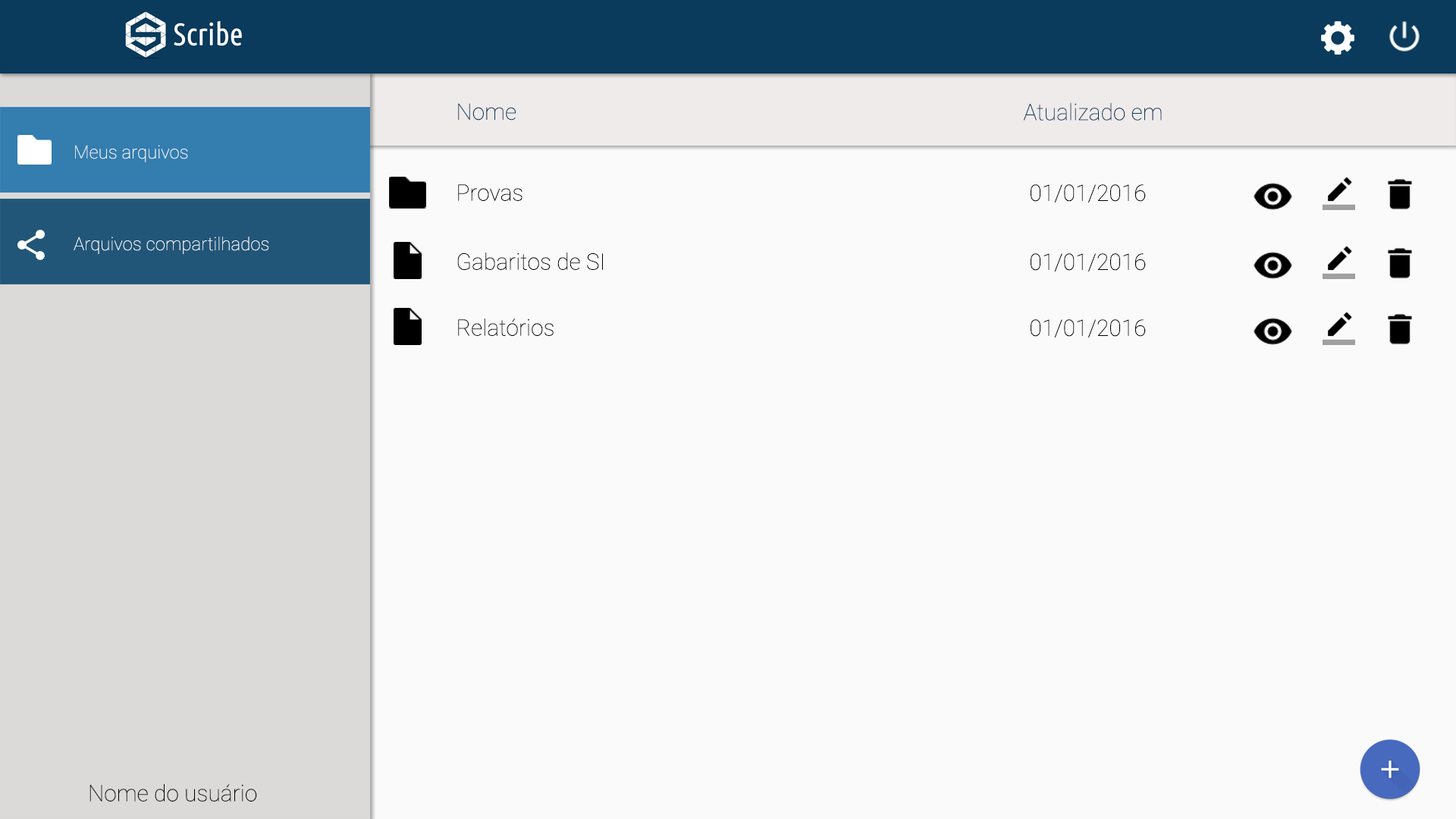
<style>
.page{position:relative;width:1456px;height:819px;background:#fafafa}
.page>*{position:absolute;margin:0}
.t1{font:22.7px "Roboto-Thin";color:#0a3b5c}
.t2{font:18.2px "Roboto-Thin";color:#ffffff}
.t3{font:22.7px "Roboto-Thin";color:#000000}
</style>
<div class="page">
<p class="t1" style="left:458px;top:103px;width:58px;height:18px">Nome</p>
<p class="t1" style="left:1024px;top:102px;width:138px;height:19px">Atualizado em</p>
<p class="t2" style="left:75px;top:145px;width:113px;height:17px">Meus arquivos</p>
<p class="t3" style="left:458px;top:184px;width:64px;height:17px">Provas</p>
<p class="t3" style="left:1031px;top:184px;width:115px;height:18px">01/01/2016</p>
<p class="t2" style="left:74px;top:237px;width:194px;height:17px">Arquivos compartilhados</p>
<p class="t3" style="left:457px;top:253px;width:146px;height:17px">Gabaritos de SI</p>
<p class="t3" style="left:1031px;top:253px;width:115px;height:18px">01/01/2016</p>
<p class="t3" style="left:458px;top:318px;width:96px;height:18px">Relatórios</p>
<p class="t3" style="left:1031px;top:319px;width:115px;height:18px">01/01/2016</p>
<p class="t3" style="left:89px;top:784px;width:168px;height:18px">Nome do usuário</p>
</div>
